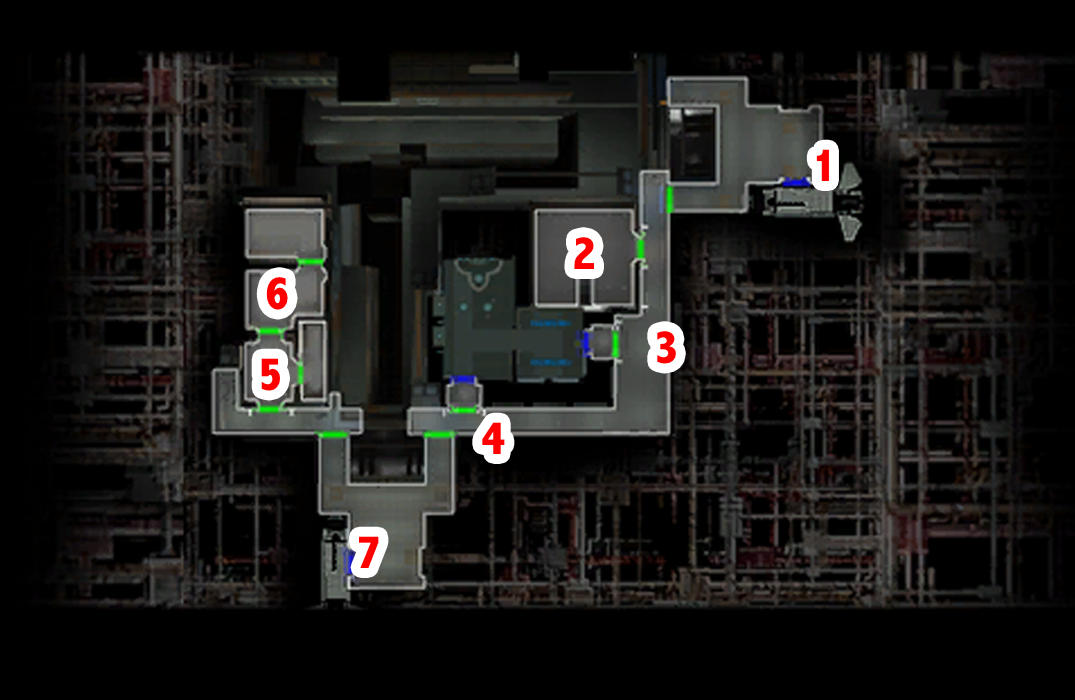
<style>
.page{position:relative;width:1075px;height:700px;background:#000000}
.page>*{position:absolute;margin:0}
.t1{font:48px "AbadiMT-CondensedExtraBold";color:#ff0000}
</style>
<div class="page">
<p class="t1" style="left:816px;top:149px;width:13px;height:32px">1</p>
<p class="t1" style="left:574px;top:237px;width:20px;height:32px">2</p>
<p class="t1" style="left:266px;top:277px;width:22px;height:33px">6</p>
<p class="t1" style="left:657px;top:331px;width:19px;height:33px">3</p>
<p class="t1" style="left:261px;top:358px;width:19px;height:33px">5</p>
<p class="t1" style="left:482px;top:422px;width:23px;height:32px">4</p>
<p class="t1" style="left:359px;top:536px;width:20px;height:32px">7</p>
</div>
